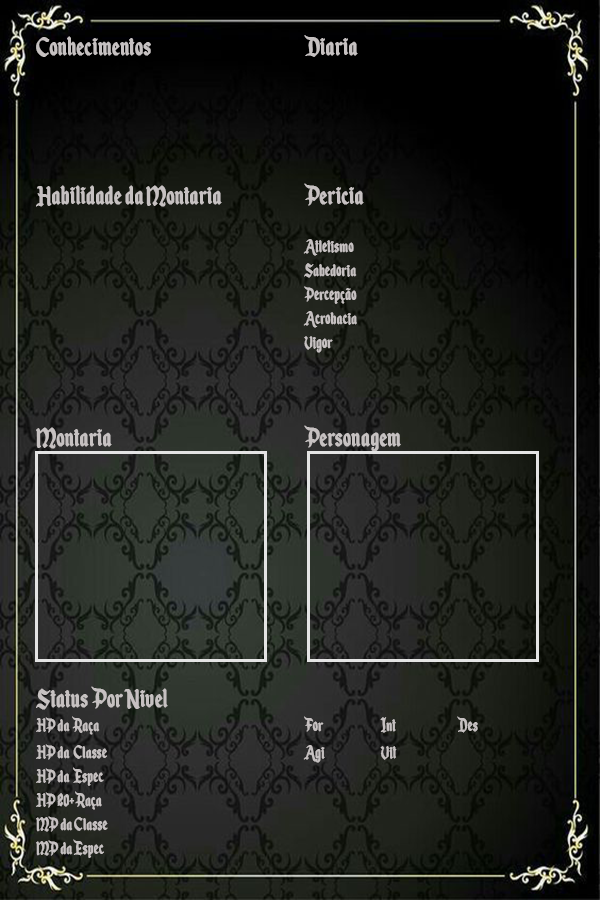
<style>
.page{position:relative;width:600px;height:900px}
.page>*{position:absolute;margin:0}
.t1{font:20px "EnchantedLand";color:#c6c1c1;font-weight:bold;scale:0.86 1}
.t2{font:31px "EnchantedLand";color:#c6c1c1;font-weight:bold;scale:0.86 1}
</style>
<div class="page">
<p class="t1" style="left:36px;top:35px;width:442px;height:823px"><span class="t2">Conhecimentos     Diaria<br><br><br><br>Habilidade da Montaria    Pericia<br></span>       <br>       Atletismo  <br>       Sabedoria <br>       Percepção<br>       Acrobacia <br>       Vigor<br><br><br><span class="t2">Montaria        Personagem<br><br><br><br><br><br><br>Status Por Nivel<br></span>HP da  Raça      For  Int  Des<br>HP da  Classe      Agi  Vit <br>HP da  Espec<br>HP 20+ Raça<br>MP da Classe<br>MP da Espec</p>
</div>
